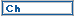
<style>
.page{position:relative;width:75px;height:16px;background:#ffffff}
.page>*{position:absolute;margin:0}
.t1{font:10px "GillSansMT";letter-spacing:0.005em;color:#115a9c;font-weight:bold;scale:1.1 1}
</style>
<div class="page">
<p class="t1" style="left:6px;top:5px;width:14px;height:7px">Ch</p>
</div>
